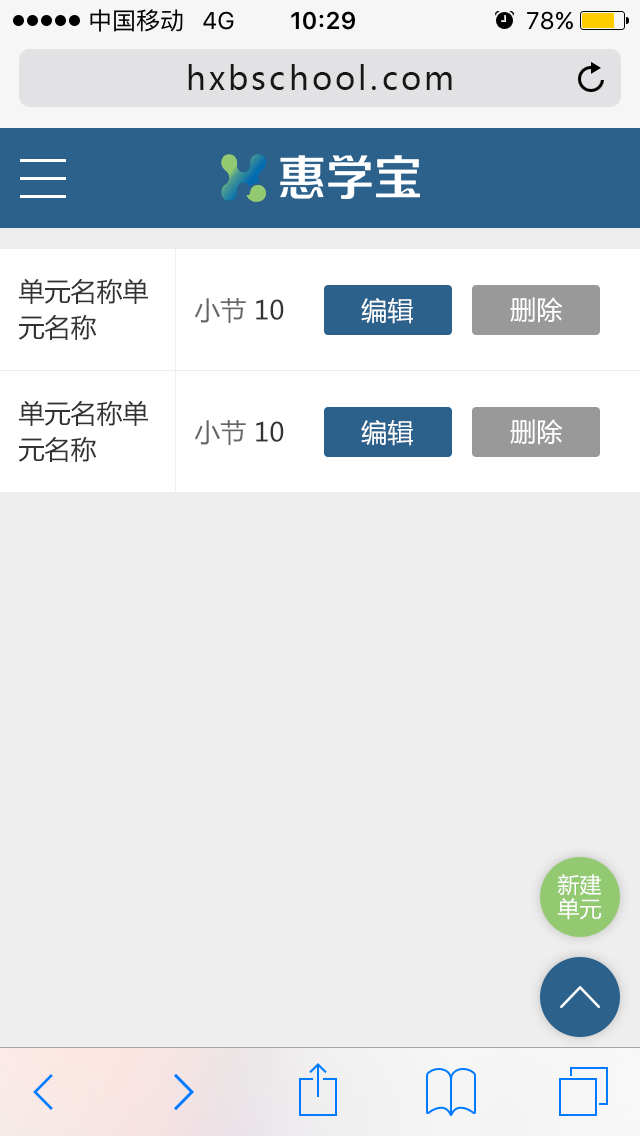
<style>
.page{position:relative;width:640px;height:1136px;background:#eeeeee}
.page>*{position:absolute;margin:0}
.t1{font:32px "MicrosoftYaHei";letter-spacing:0.1em;color:#171717}
.t2{font:26px/36px "MicrosoftYaHei";color:#333333}
.t3{font:26px "MicrosoftYaHei";color:#666666}
.t4{font:26px "MicrosoftYaHei";color:#333333}
.t5{font:26px "MicrosoftYaHei";color:#ffffff}
.t6{font:22px/24px "MicrosoftYaHei";color:#ffffff}
</style>
<div class="page">
<p class="t1" style="left:188px;top:64px;width:264px;height:26px">hxbschool.com</p>
<p class="t2" style="left:18px;top:278px;width:130px;height:62px">单元名称单<br>元名称</p>
<p class="t3" style="left:194px;top:298px;width:90px;height:25px">小节 <span class="t4">10</span></p>
<p class="t5" style="left:361px;top:298px;width:52px;height:26px">编辑</p>
<p class="t5" style="left:510px;top:297px;width:53px;height:26px">删除</p>
<p class="t2" style="left:18px;top:400px;width:130px;height:62px">单元名称单<br>元名称</p>
<p class="t3" style="left:194px;top:420px;width:90px;height:25px">小节 <span class="t4">10</span></p>
<p class="t5" style="left:361px;top:420px;width:52px;height:26px">编辑</p>
<p class="t5" style="left:510px;top:419px;width:53px;height:26px">删除</p>
<p class="t6" style="left:557px;top:874px;width:45px;height:46px">新建<br>单元</p>
</div>
